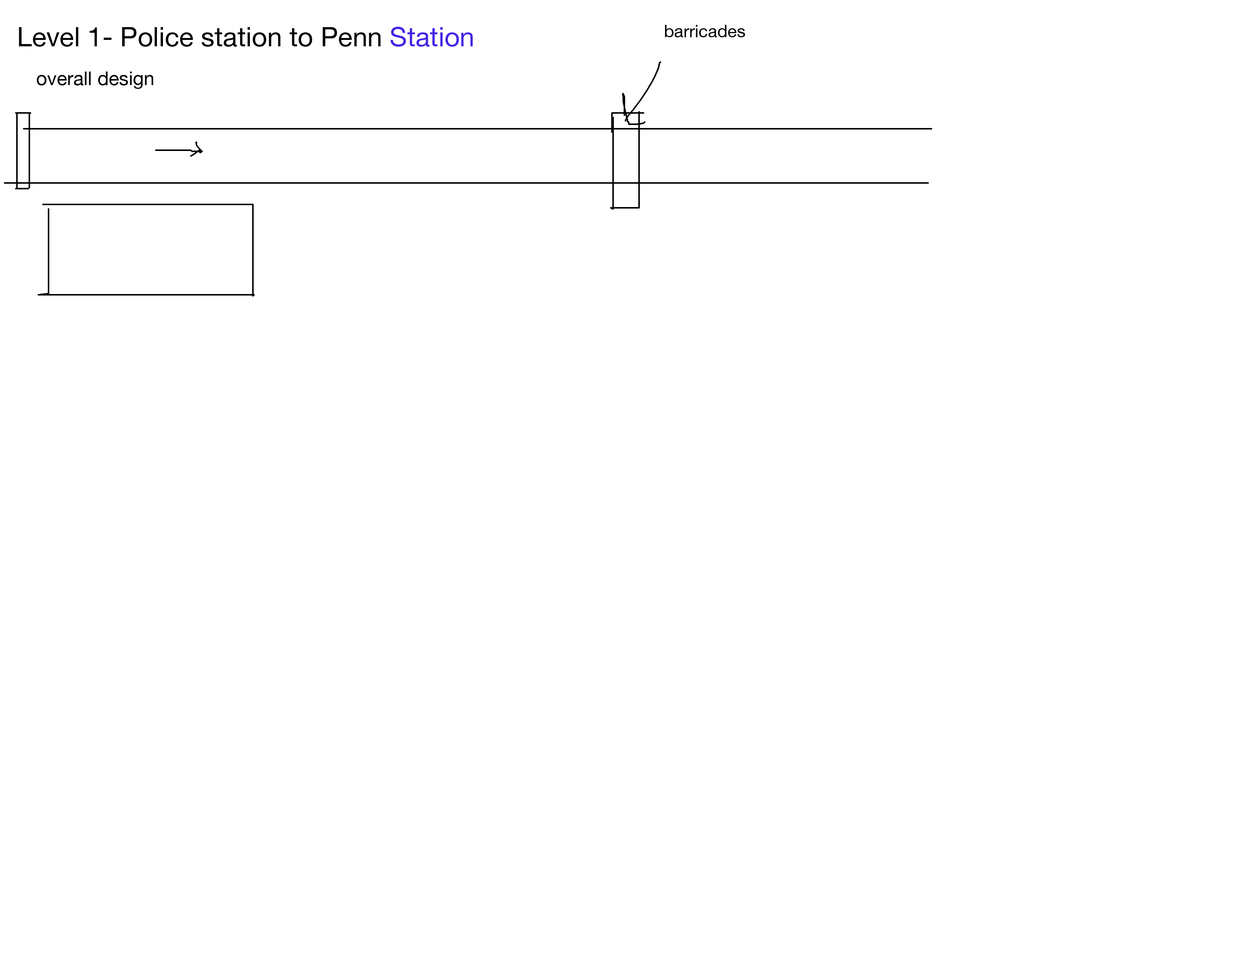
<style>
.page{position:relative;width:1242px;height:960px;background:#ffffff}
.page>*{position:absolute;margin:0}
.t1{font:26.8px "HelveticaNeue";color:#000000}
.t2{font:26.8px "HelveticaNeue";color:#4425e5}
.t3{font:17.3px "HelveticaNeue";color:#000000}
.t4{font:19.1px "HelveticaNeue";color:#000000}
</style>
<div class="page">
<p class="t1" style="left:19px;top:27px;width:454px;height:20px">Level 1- Police station to Penn <span class="t2">Station</span></p>
<p class="t3" style="left:665px;top:25px;width:80px;height:12px">barricades</p>
<p class="t4" style="left:37px;top:72px;width:116px;height:17px">overall design</p>
</div>
